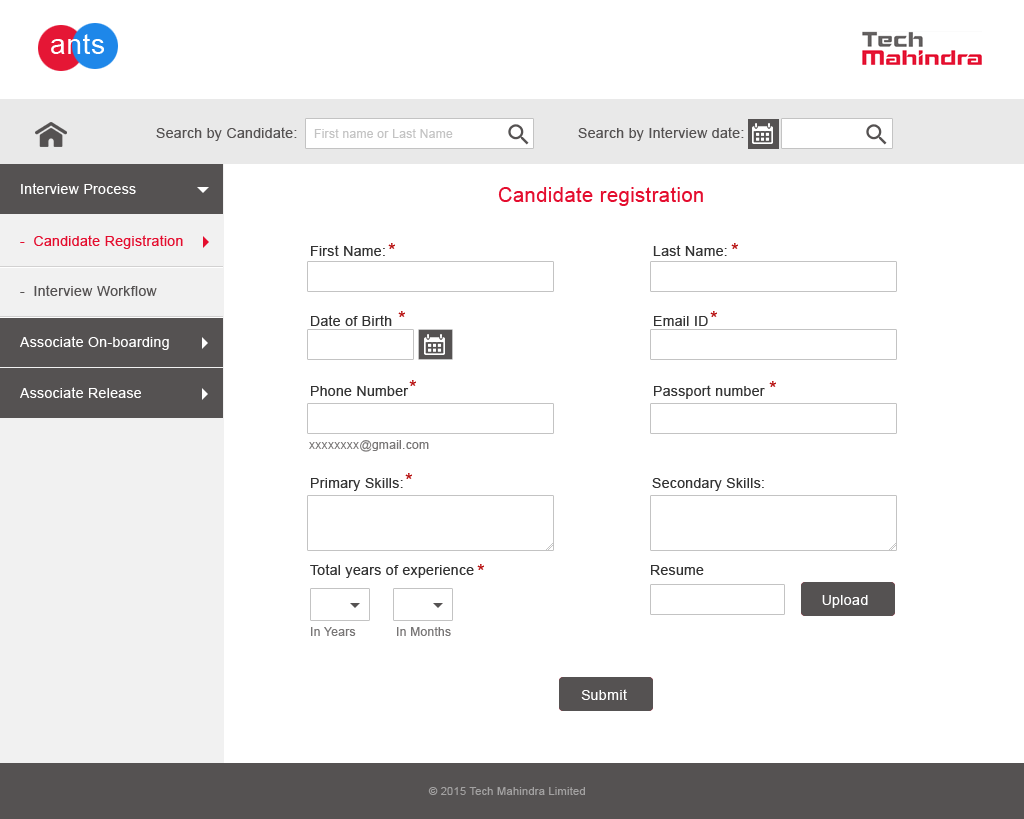
<style>
.page{position:relative;width:1024px;height:819px;background:#ffffff}
.page>*{position:absolute;margin:0}
.t1{font:28px "ArialMT";letter-spacing:0.025em;color:#ffffff}
.t2{font:14px "ArialMT";letter-spacing:0.025em;color:#555252}
.t3{font:12px "ArialMT";letter-spacing:0.025em;color:#c3c3c3}
.t4{font:14px "ArialMT";letter-spacing:0.025em;color:#ffffff}
.t5{font:20px "ArialMT";letter-spacing:0.025em;color:#e40d2e}
.t6{font:14px "ArialMT";letter-spacing:0.025em;color:#e40d2e}
.t7{font:14px/35px "ArialMT";letter-spacing:0.025em;color:#333333}
.t8{font:12px "ArialMT";letter-spacing:0.025em;color:#777575}
.t9{font:14px "ArialMT";letter-spacing:0.025em;color:#333333}
.t10{font:11px "ArialMT";letter-spacing:0.025em;color:#a3a2a2}
</style>
<div class="page">
<p class="t1" style="left:51px;top:34px;width:53px;height:20px">ants</p>
<p class="t2" style="left:156px;top:127px;width:141px;height:14px">Search by Candidate:</p>
<p class="t3" style="left:314px;top:129px;width:139px;height:9px">First name or Last Name</p>
<p class="t2" style="left:578px;top:127px;width:166px;height:14px">Search by Interview date:</p>
<p class="t4" style="left:21px;top:183px;width:115px;height:11px">Interview Process</p>
<p class="t5" style="left:498px;top:187px;width:205px;height:19px">Candidate registration</p>
<p class="t6" style="left:20px;top:235px;width:163px;height:14px">-  Candidate Registration</p>
<p class="t7" style="left:311px;top:245px;width:98px;height:151px">First Name:<br><br>Date of Birth<br><br>Phone Number</p>
<p class="t7" style="left:653px;top:245px;width:112px;height:154px">Last Name:<br><br>Email ID<br><br>Passport number</p>
<p class="t2" style="left:20px;top:285px;width:137px;height:11px">-  Interview Workflow</p>
<p class="t4" style="left:20px;top:336px;width:149px;height:14px">Associate On-boarding</p>
<p class="t4" style="left:20px;top:387px;width:121px;height:11px">Associate Release</p>
<p class="t8" style="left:309px;top:440px;width:120px;height:12px">xxxxxxxx@gmail.com</p>
<p class="t9" style="left:311px;top:478px;width:92px;height:13px">Primary Skills:</p>
<p class="t9" style="left:652px;top:478px;width:112px;height:13px">Secondary Skills:</p>
<p class="t9" style="left:310px;top:564px;width:164px;height:14px">Total years of experience</p>
<p class="t9" style="left:651px;top:565px;width:53px;height:10px">Resume</p>
<p class="t4" style="left:822px;top:595px;width:46px;height:13px">Upload</p>
<p class="t8" style="left:311px;top:627px;width:45px;height:9px">In Years</p>
<p class="t8" style="left:397px;top:627px;width:54px;height:9px">In Months</p>
<p class="t4" style="left:581px;top:689px;width:46px;height:11px">Submit</p>
<p class="t10" style="left:428px;top:787px;width:157px;height:8px">© 2015 Tech Mahindra Limited</p>
</div>
